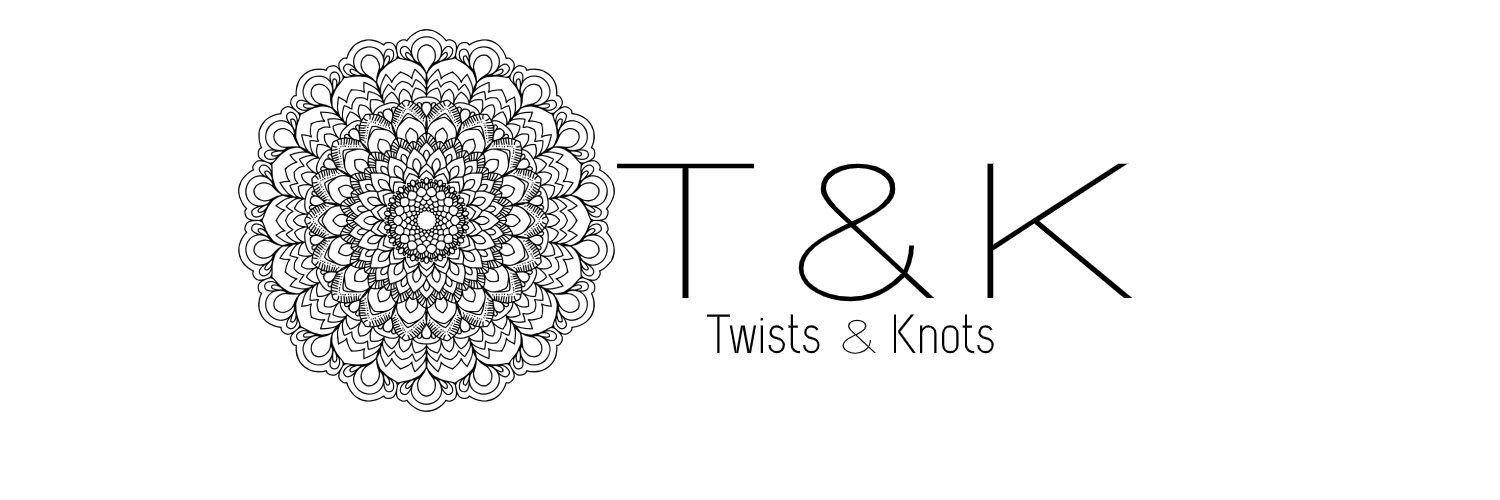
<style>
.page{position:relative;width:1500px;height:500px;background:#ffffff}
.page>*{position:absolute;margin:0}
.t1{font:223px "DISCO";color:#000000}
.t2{font:55px "Capsuula";color:#000000}
.t3{font:55px "DISCO";color:#000000}
</style>
<div class="page">
<p class="t1" style="left:617px;top:163px;width:516px;height:139px">T&amp;K</p>
<p class="t2" style="left:707px;top:314px;width:287px;height:40px">Twists <span class="t3">&amp; </span>Knots</p>
</div>
